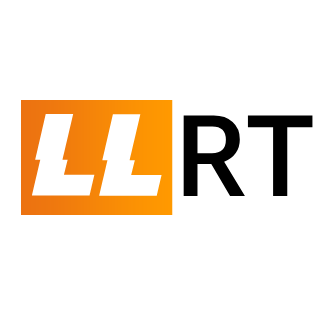
<style>
.page{position:relative;width:323px;height:323px;background:#ffffff}
.page>*{position:absolute;margin:0}
.t1{font:116px "AmazonEmber-Medium";color:#000000}
</style>
<div class="page">
<p class="t1" style="left:183px;top:115px;width:130px;height:81px">RT</p>
</div>
